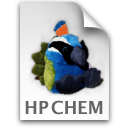
<style>
.page{position:relative;width:128px;height:128px;background:#ffffff}
.page>*{position:absolute;margin:0}
.t1{font:18px "LucidaGrande-Bold";letter-spacing:-0.02em;color:#656565}
</style>
<div class="page">
<p class="t1" style="left:25px;top:100px;width:78px;height:15px">HP CHEM</p>
</div>
